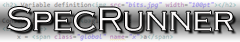
<style>
.page{position:relative;width:240px;height:42px}
.page>*{position:absolute;margin:0}
.t1{font:34px "CopperplateGothic-Light";color:#fbf9f9}
</style>
<div class="page">
<p class="t1" style="left:7px;top:7px;width:226px;height:25px">SpecRunner</p>
</div>
